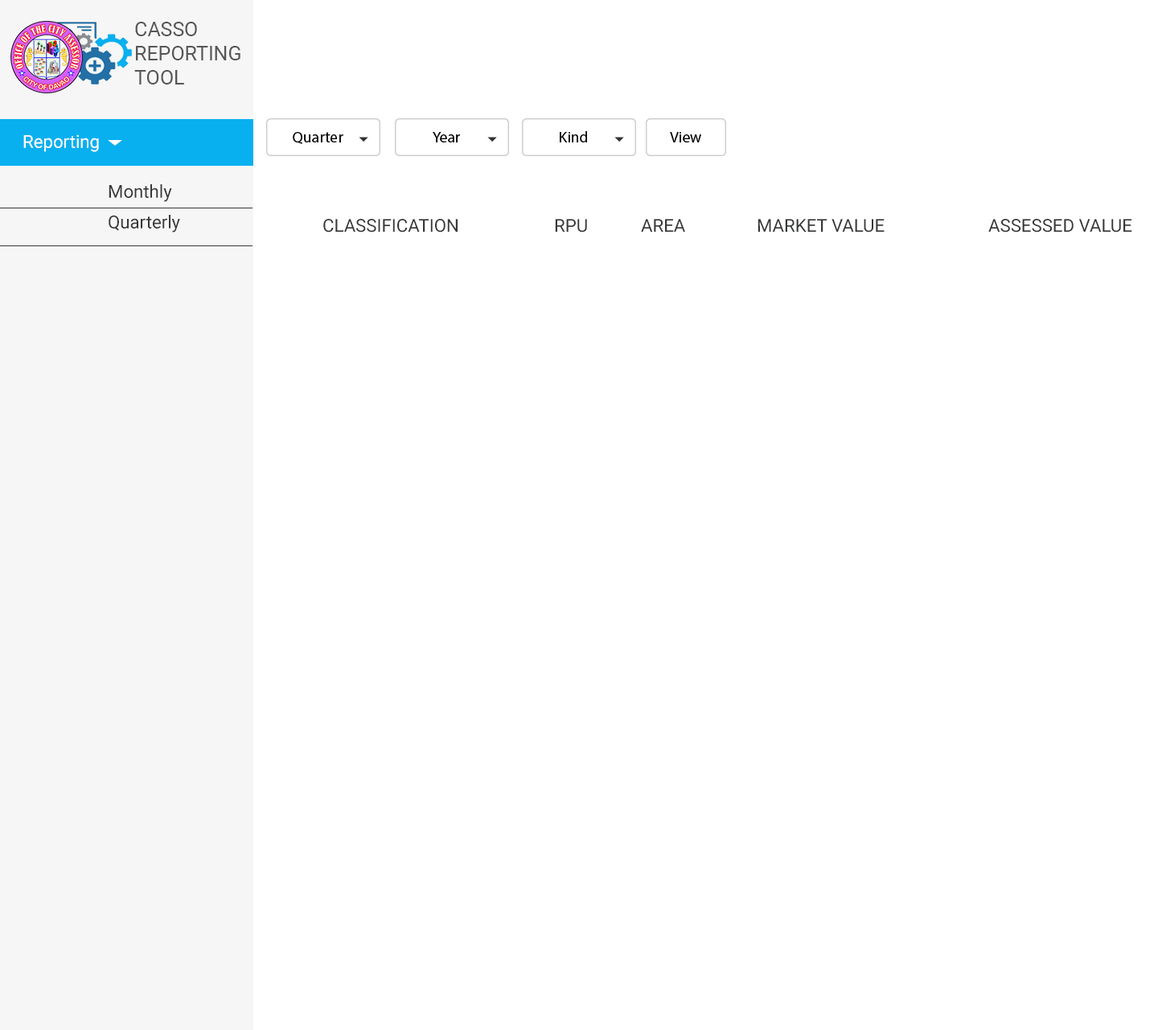
<style>
.page{position:relative;width:1158px;height:1030px;background:#ffffff}
.page>*{position:absolute;margin:0}
.t1{font:20.1px "Roboto-Regular";color:#575656}
.t2{font:17.9px "Roboto-Regular";color:#ffffff}
.t3{font:17.9px "Roboto-Regular";color:#373838}
</style>
<div class="page">
<p class="t1" style="left:134px;top:22px;width:106px;height:62px">CASSO <br>REPORTING <br>TOOL</p>
<p class="t2" style="left:23px;top:134px;width:76px;height:18px">Reporting</p>
<p class="t3" style="left:109px;top:184px;width:63px;height:18px">Monthly</p>
<p class="t3" style="left:109px;top:215px;width:71px;height:17px">Quarterly</p>
<p class="t3" style="left:323px;top:219px;width:809px;height:13px">CLASSIFICATION    RPU  AREA   MARKET VALUE    ASSESSED VALUE</p>
</div>
